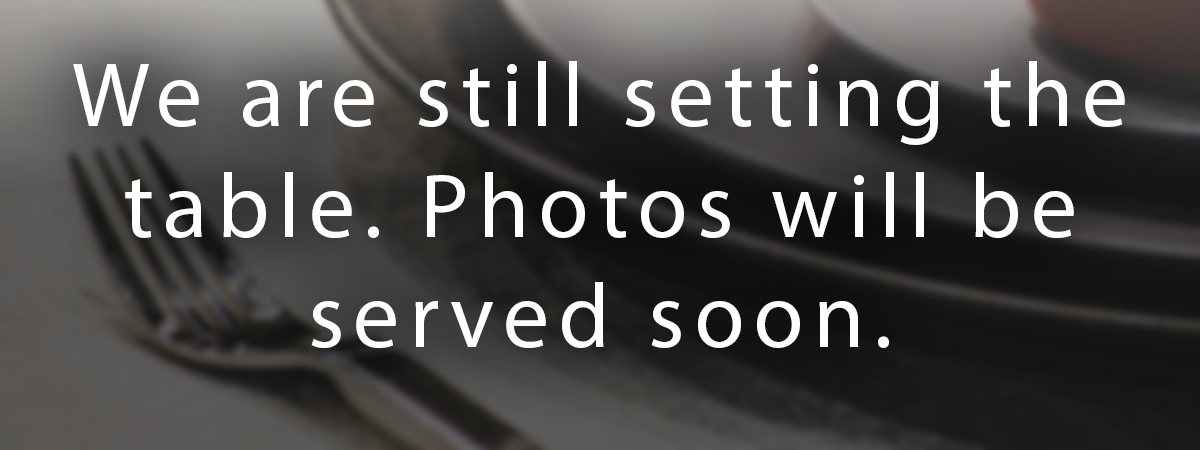
<style>
.page{position:relative;width:1200px;height:450px}
.page>*{position:absolute;margin:0}
.t1{font:92px "MyriadPro-Regular";letter-spacing:0.1em;color:#ffffff}
</style>
<div class="page">
<p class="t1" style="left:73px;top:61px;width:1052px;height:287px;text-align:center">We are still setting the table. Photos will be served soon.</p>
</div>
